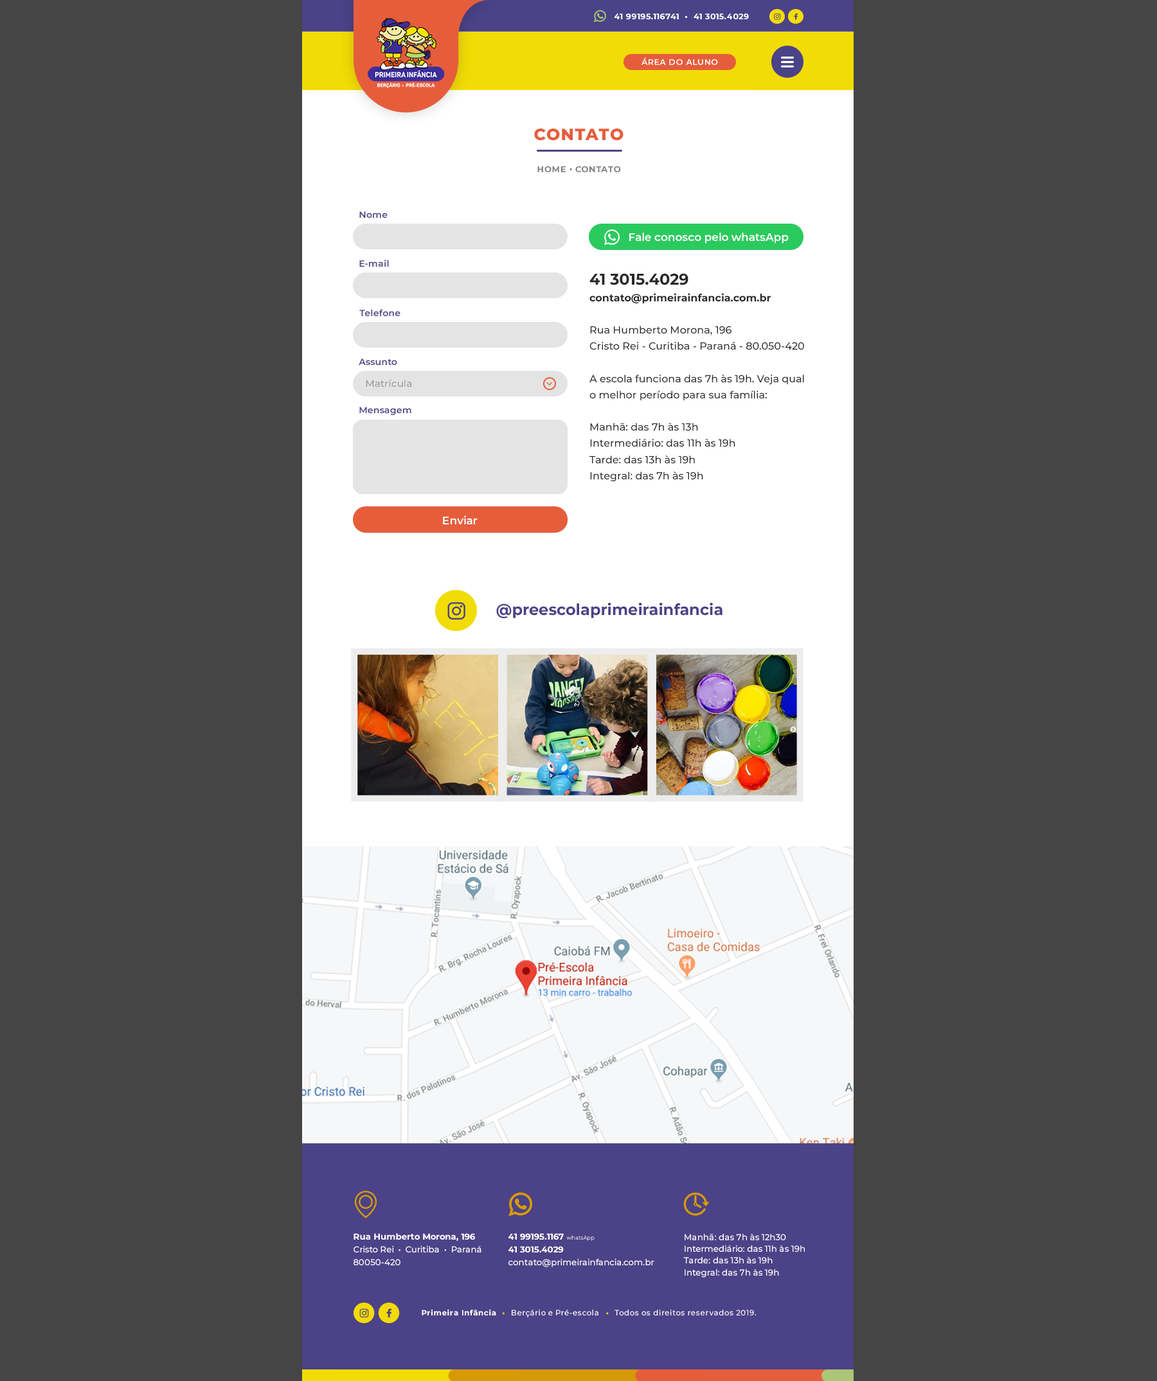
<style>
.page{position:relative;width:1157px;height:1381px;background:#454545}
.page>*{position:absolute;margin:0}
.t1{font:8px "Montserrat-Bold";letter-spacing:0.05em;color:#ffffff}
.t2{font:8px "Montserrat-SemiBold";letter-spacing:0.055em;color:#ffffff;text-transform:uppercase}
.t3{font:16.2px "Montserrat-ExtraBold";letter-spacing:0.05em;color:#e65d3c;text-transform:uppercase}
.t4{font:8.4px "Montserrat-Bold";letter-spacing:0.05em;color:#818181;text-transform:uppercase}
.t5{font:9px "Montserrat-SemiBold";color:#4b4287}
.t6{font:11.1px "Montserrat-SemiBold";color:#ffffff}
.t7{font:10.3px/16.2px "Montserrat-Medium";color:#282828}
.t8{font:15.4px/16.2px "Montserrat-Bold";color:#282828}
.t9{font:10.3px/16.2px "Montserrat-Bold";color:#282828}
.t10{font:9.6px "Montserrat-Medium";color:#999999}
.t11{font:15.4px "Montserrat-Bold";color:#4b4287}
.t12{font:8.6px/12.9px "Montserrat-Medium";color:#ffffff}
.t13{font:8.6px/12.9px "Montserrat-Bold";color:#ffffff}
.t14{font:8.6px/12.8px "Montserrat-Medium";color:#ffffff}
.t15{font:8.6px/12.8px "Montserrat-Bold";color:#ffffff}
.t16{font:5.3px/12.8px "Montserrat-Regular";color:#ffffff}
.t17{font:8.6px/11.8px "Montserrat-Medium";color:#ffffff}
.t18{font:7.6px "Montserrat-Medium";letter-spacing:0.055em;color:#ffffff}
.t19{font:7.6px "Montserrat-Bold";letter-spacing:0.055em;color:#ffffff}
.t20{font:7.6px "Montserrat-Bold";letter-spacing:0.055em;color:#f2dc05}
</style>
<div class="page">
<p class="t1" style="left:615px;top:13px;width:134px;height:7px">41 99195.116741  •  41 3015.4029</p>
<p class="t2" style="left:642px;top:57px;width:76px;height:8px">Área do aluno</p>
<p class="t3" style="left:534px;top:129px;width:90px;height:12px">Contato</p>
<p class="t4" style="left:537px;top:166px;width:84px;height:7px">hOME • contato</p>
<p class="t5" style="left:359px;top:211px;width:29px;height:7px">Nome</p>
<p class="t6" style="left:629px;top:233px;width:160px;height:11px">Fale conosco pelo whatsApp</p>
<p class="t5" style="left:359px;top:260px;width:30px;height:7px">E-mail</p>
<p class="t7" style="left:589px;top:273px;width:215px;height:208px;text-align:justify"><span class="t8">41 3015.4029<br></span><span class="t9">contato@primeirainfancia.com.br<br><br></span>Rua Humberto Morona, 196<br>Cristo Rei - Curitiba - Paraná - 80.050-420<br><br>A escola funciona das 7h às 19h. Veja qual o melhor período para sua família:<br><br>Manhã: das 7h às 13h<br>Intermediário: das 11h às 19h<br>Tarde: das 13h às 19h<br>Integral: das 7h às 19h</p>
<p class="t5" style="left:359px;top:309px;width:41px;height:7px">Telefone</p>
<p class="t5" style="left:359px;top:359px;width:38px;height:6px">Assunto</p>
<p class="t10" style="left:366px;top:380px;width:45px;height:7px">Matrícula</p>
<p class="t5" style="left:359px;top:407px;width:52px;height:8px">Mensagem</p>
<p class="t6" style="left:443px;top:516px;width:35px;height:9px">Enviar</p>
<p class="t11" style="left:496px;top:603px;width:227px;height:15px">@preescolaprimeirainfancia</p>
<p class="t12" style="left:354px;top:1234px;width:127px;height:32px"><span class="t13">Rua Humberto Morona, 196<br></span>Cristo Rei  •  Curitiba  •  Paraná<br>80050-420</p>
<p class="t14" style="left:508px;top:1234px;width:146px;height:34px"><span class="t15">41 99195.1167 </span><span class="t16">whatsApp<br></span><span class="t15">41 3015.4029<br></span>contato@primeirainfancia.com.br</p>
<p class="t17" style="left:683px;top:1234px;width:122px;height:44px">Manhã: das 7h às 12h30<br>Intermediário: das 11h às 19h<br>Tarde: das 13h às 19h<br>Integral: das 7h às 19h</p>
<p class="t18" style="left:422px;top:1309px;width:334px;height:9px"><span class="t19">Primeira Infância  </span><span class="t20">•  </span>Berçário e Pré-escola   <span class="t20">•  </span>Todos os direitos reservados 2019.</p>
</div>
